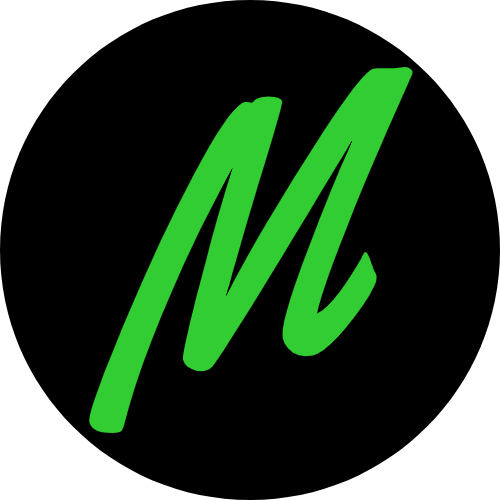
<style>
.page{position:relative;width:500px;height:500px;background:#000000}
.page>*{position:absolute;margin:0}
.t1{font:360px "Yellowtail-Regular";color:#32cd32}
</style>
<div class="page">
<p class="t1" style="left:87px;top:66px;width:326px;height:368px;rotate:-13deg">M</p>
</div>
